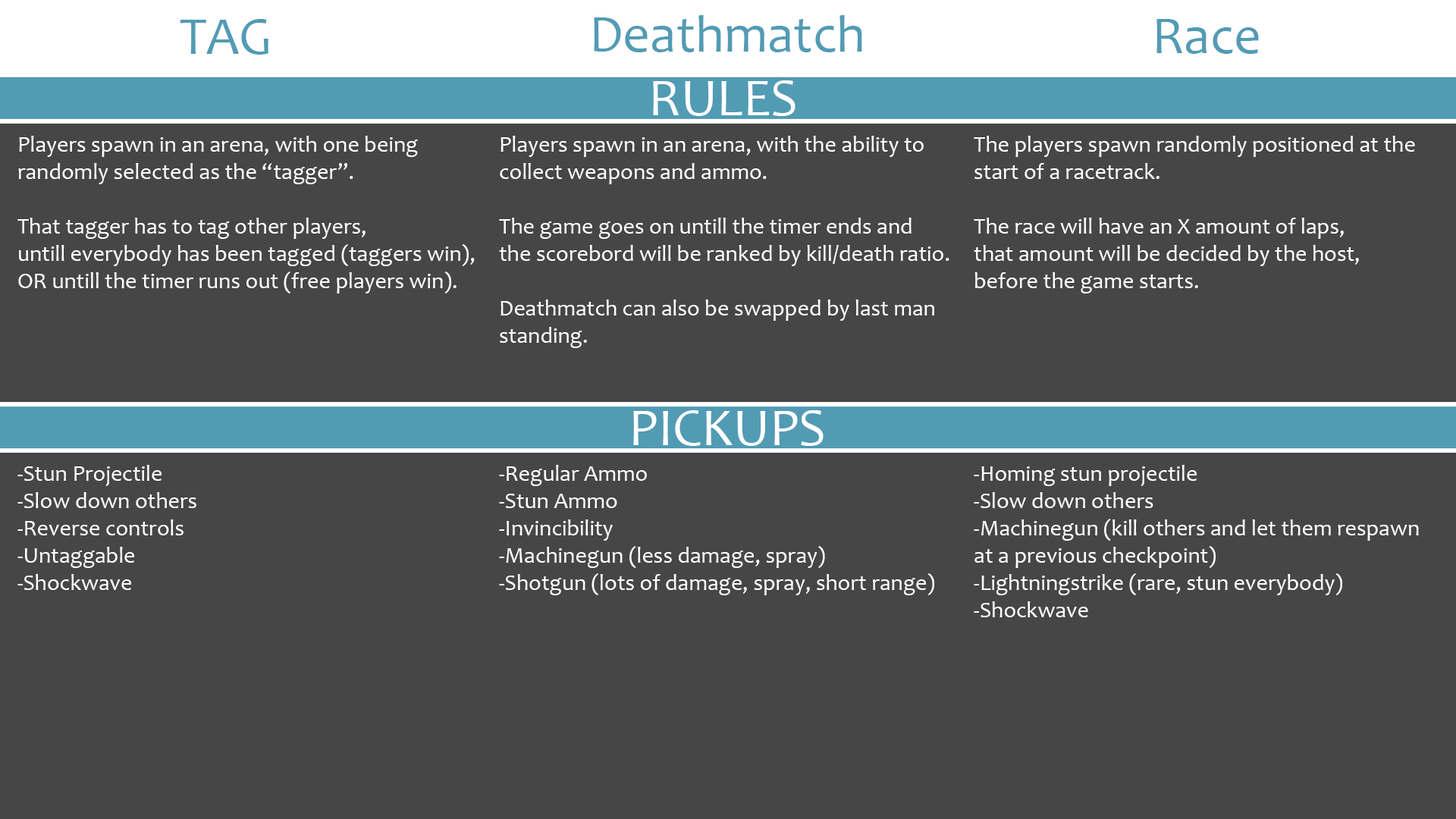
<style>
.page{position:relative;width:1456px;height:819px;background:#464646}
.page>*{position:absolute;margin:0}
.t1{font:53.1px "Candara";color:#529bb4}
.t2{font:53.1px "Candara";color:#ffffff}
.t3{font:22.7px "Candara";color:#ffffff}
</style>
<div class="page">
<p class="t1" style="left:594px;top:15px;width:268px;height:37px">Deathmatch</p>
<p class="t1" style="left:180px;top:19px;width:88px;height:36px">TAG</p>
<p class="t1" style="left:1156px;top:19px;width:103px;height:35px">Race</p>
<p class="t2" style="left:653px;top:80px;width:142px;height:36px">RULES</p>
<p class="t3" style="left:17px;top:136px;width:458px;height:157px">Players spawn in an arena, with one being <br>randomly selected as the “tagger”.<br><br>That tagger has to tag other players,<br>untill everybody has been tagged (taggers win),<br>OR untill the timer runs out (free players win).</p>
<p class="t3" style="left:499px;top:136px;width:450px;height:212px">Players spawn in an arena, with the ability to<br>collect weapons and ammo.<br><br>The game goes on untill the timer ends and<br>the scorebord will be ranked by kill/death ratio.<br><br>Deathmatch can also be swapped by last man<br>standing.</p>
<p class="t3" style="left:974px;top:136px;width:441px;height:157px">The players spawn randomly positioned at the <br>start of a racetrack.<br><br>The race will have an X amount of laps, <br>that amount will be decided by the host, <br>before the game starts.</p>
<p class="t2" style="left:633px;top:410px;width:191px;height:36px">PICKUPS</p>
<p class="t3" style="left:17px;top:465px;width:179px;height:125px">-Stun Projectile<br>-Slow down others<br>-Reverse controls<br>-Untaggable<br>-Shockwave</p>
<p class="t3" style="left:499px;top:465px;width:435px;height:130px">-Regular Ammo<br>-Stun Ammo<br>-Invincibility<br>-Machinegun (less damage, spray)<br>-Shotgun (lots of damage, spray, short range)</p>
<p class="t3" style="left:974px;top:465px;width:445px;height:152px">-Homing stun projectile<br>-Slow down others<br>-Machinegun (kill others and let them respawn<br>at a previous checkpoint)<br>-Lightningstrike (rare, stun everybody)<br>-Shockwave</p>
</div>
